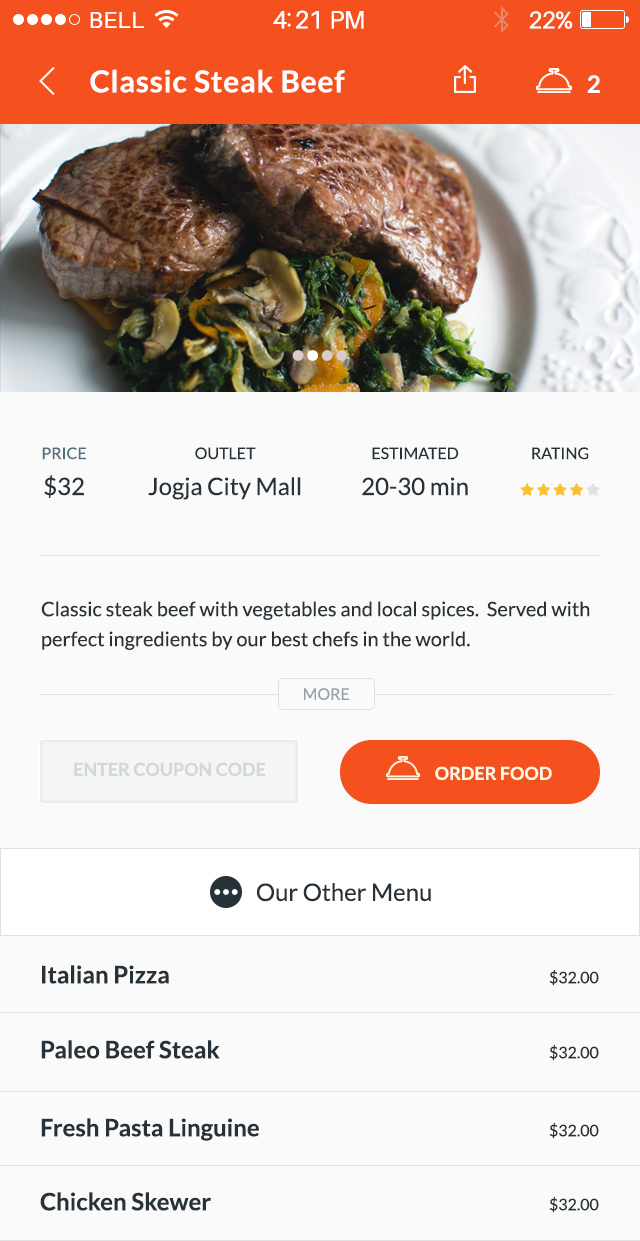
<style>
.page{position:relative;width:640px;height:1241px;background:#fafafa}
.page>*{position:absolute;margin:0}
.t1{font:23px "Aileron-Regular";letter-spacing:0.02em;color:#ffffff}
.t2{font:25px "Aileron-Regular";letter-spacing:-0.02em;color:#ffffff}
.t3{font:24px "Aileron-Regular";letter-spacing:-0.02em;color:#ffffff}
.t4{font:30px "Lato-Bold";letter-spacing:0.025em;color:#ffffff}
.t5{font:24px "Lato-Bold";letter-spacing:0.1em;color:#ffffff;text-transform:uppercase}
.t6{font:24px "Lato-Bold";letter-spacing:0.025em;color:#d7ccc8}
.t7{font:24px "Lato-Bold";letter-spacing:0.025em;color:#ffffff}
.t8{font:16px/36px "Lato-Regular";color:#546e7a;text-transform:uppercase}
.t9{font:24px/36px "Lato-Regular";color:#263238}
.t10{font:16px/36px "Lato-Regular";color:#263238;text-transform:uppercase}
.t11{font:20px/30px "Lato-Regular";color:#263238}
.t12{font:16px "Lato-Regular";color:#90a4ae;text-transform:uppercase}
.t13{font:18px "Lato-Bold";color:#cfd8dc;text-transform:uppercase}
.t14{font:18px "Lato-Bold";color:#fef8e2;text-transform:uppercase}
.t15{font:24px "Lato-Regular";color:#263238}
.t16{font:24px "Lato-Bold";color:#263238}
.t17{font:16px/30px "Lato-Regular";color:#263238}
</style>
<div class="page">
<p class="t1" style="left:90px;top:12px;width:54px;height:16px">BELL</p>
<p class="t2" style="left:273px;top:10px;width:91px;height:19px">4:21 PM</p>
<p class="t3" style="left:529px;top:11px;width:44px;height:18px">22%</p>
<p class="t4" style="left:90px;top:69px;width:255px;height:24px">Classic Steak Beef</p>
<p class="t5" style="left:587px;top:75px;width:13px;height:18px">2</p>
<p class="t6" style="left:292px;top:350px;width:55px;height:11px">•<span class="t7">•</span>••</p>
<p class="t8" style="left:42px;top:447px;width:44px;height:51px;text-align:center">Price<br><span class="t9">$32</span></p>
<p class="t9" style="left:148px;top:447px;width:153px;height:53px;text-align:center"><span class="t10">Outlet<br></span>Jogja City Mall</p>
<p class="t10" style="left:362px;top:447px;width:106px;height:49px;text-align:center">estimated<br><span class="t9">20-30 min</span></p>
<p class="t11" style="left:41px;top:601px;width:549px;height:49px">Classic steak beef with vegetables and local spices.  Served with perfect ingredients by our best chefs in the world.</p>
<p class="t12" style="left:304px;top:688px;width:45px;height:12px">more</p>
<p class="t13" style="left:74px;top:762px;width:192px;height:15px">Enter coupon Code</p>
<p class="t14" style="left:435px;top:766px;width:117px;height:15px">Order food</p>
<p class="t15" style="left:257px;top:883px;width:174px;height:19px">Our Other Menu</p>
<p class="t16" style="left:42px;top:965px;width:127px;height:19px">Italian Pizza</p>
<p class="t17" style="left:549px;top:970px;width:50px;height:16px">$32.00<br>00</p>
<p class="t16" style="left:41px;top:1040px;width:179px;height:19px">Paleo Beef Steak</p>
<p class="t17" style="left:549px;top:1045px;width:50px;height:16px">$32.00<br>00</p>
<p class="t16" style="left:41px;top:1118px;width:218px;height:23px">Fresh Pasta Linguine</p>
<p class="t17" style="left:549px;top:1123px;width:50px;height:16px">$32.00<br>00</p>
<p class="t16" style="left:40px;top:1192px;width:171px;height:19px">Chicken Skewer</p>
<p class="t17" style="left:549px;top:1197px;width:50px;height:16px">$32.00<br>00</p>
</div>
